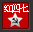
<style>
.page{position:relative;width:33px;height:32px;background:#c50000}
.page>*{position:absolute;margin:0}
.t1{font:10.4px "SimSun";letter-spacing:-0.25em;color:#ffffff}
</style>
<div class="page">
<p class="t1" style="left:4px;top:4px;width:25px;height:9px">红四七</p>
</div>
